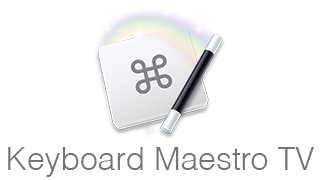
<style>
.page{position:relative;width:320px;height:180px;background:#ffffff}
.page>*{position:absolute;margin:0}
.t1{font:31.9px "Helvetica-Light";color:#737373}
</style>
<div class="page">
<p class="t1" style="left:8px;top:147px;width:306px;height:30px">Keyboard Maestro TV</p>
</div>
